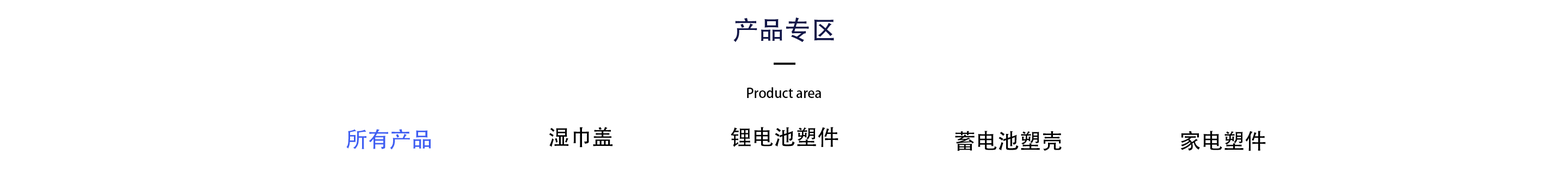
<style>
.page{position:relative;width:1568px;height:196px;background:#ffffff}
.page>*{position:absolute;margin:0}
.t1{font:26.1px "AdobeHeitiStd-Regular";color:#111648}
.t2{font:13.1px "AdobeHeitiStd-Regular";color:#000000}
.t3{font:21.8px "AdobeHeitiStd-Regular";color:#405ff2}
.t4{font:21.8px "AdobeHeitiStd-Regular";color:#000000}
</style>
<div class="page">
<p class="t1" style="left:733px;top:17px;width:101px;height:25px">产品专区</p>
<p class="t2" style="left:747px;top:87px;width:74px;height:11px">Product area</p>
<p class="t3" style="left:346px;top:129px;width:85px;height:21px">所有产品</p>
<p class="t4" style="left:549px;top:127px;width:63px;height:21px">湿巾盖</p>
<p class="t4" style="left:731px;top:127px;width:107px;height:20px">锂电池塑件</p>
<p class="t4" style="left:955px;top:131px;width:107px;height:20px">蓄电池塑壳</p>
<p class="t4" style="left:1180px;top:131px;width:86px;height:20px">家电塑件</p>
</div>
